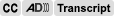
<style>
.page{position:relative;width:114px;height:16px;background:#dddddd}
.page>*{position:absolute;margin:0}
.t1{font:12.2px "Arial-BoldMT";color:#000000;scale:0.87 1}
.t2{font:12.1px "Arial-BoldMT";color:#000000}
.t3{font:12px "Arial-BoldMT";color:#333333}
.t4{font:11px "Arial-BoldMT";color:#000000}
</style>
<div class="page">
<p class="t1" style="left:3px;top:3px;width:15px;height:10px">CC</p>
<p class="t1" style="left:3px;top:3px;width:15px;height:10px">CC</p>
<p class="t2" style="left:25px;top:3px;width:10px;height:9px">A</p>
<p class="t3" style="left:35px;top:3px;width:8px;height:9px">D</p>
<p class="t3" style="left:35px;top:3px;width:8px;height:9px">D</p>
<p class="t4" style="left:57px;top:3px;width:54px;height:12px">Transcript</p>
</div>
